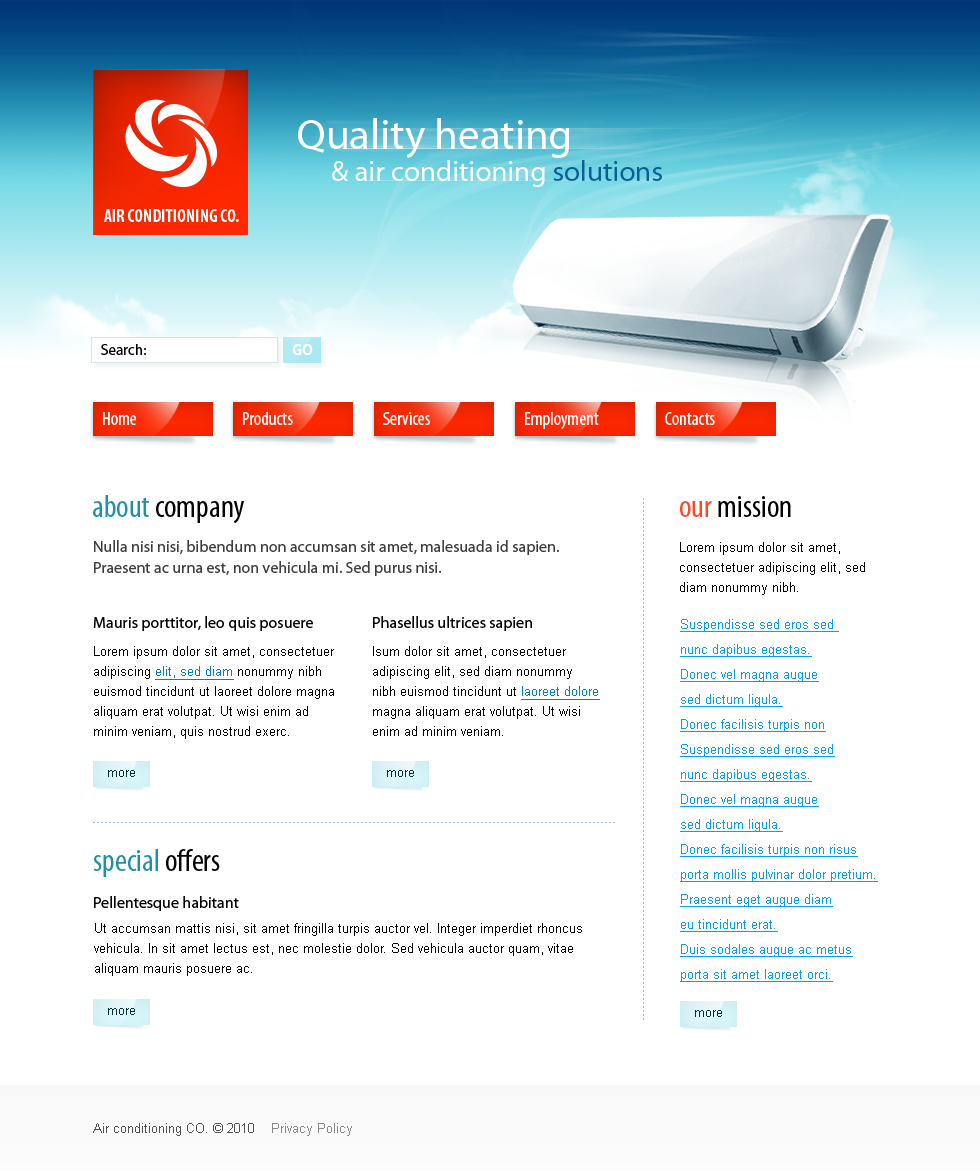
<style>
.page{position:relative;width:980px;height:1170px;background:#ffffff}
.page>*{position:absolute;margin:0}
.t1{font:43px "MyriadPro-Regular";color:#ffffff}
.t2{font:29px "MyriadPro-Regular";color:#ffffff}
.t3{font:29px "MyriadPro-Regular";color:#0a5f93}
.t4{font:18px "MyriadPro-BoldCond";color:#ffffff;text-transform:uppercase}
.t5{font:15px "MyriadPro-Regular";color:#000000}
.t6{font:15px "MyriadPro-Bold";color:#ffffff}
.t7{font:19px "MyriadPro-Cond";color:#ffffff}
.t8{font:32px "MyriadPro-Cond";color:#000000}
.t9{font:32px "MyriadPro-Cond";color:#1e90ac}
.t10{font:32px "MyriadPro-Cond";color:#fe4726}
.t11{font:16px/21px "MyriadPro-Regular";color:#3d3d3d}
.t12{font:13px/20px "ArialMT";color:#000000}
.t13{font:16px "MyriadPro-Regular";color:#000000}
.t14{font:13px/25px "ArialMT";color:#05a0ef;text-decoration:underline}
.t15{font:13px/20px "ArialMT";color:#0380c0;text-decoration:underline}
.t16{font:13px "ArialMT";color:#03303a}
.t17{font:13px "ArialMT";color:#515151}
.t18{font:13px "ArialMT";color:#888888}
</style>
<div class="page">
<p class="t1" style="left:298px;top:118px;width:272px;height:41px">Quality heating</p>
<p class="t2" style="left:332px;top:160px;width:330px;height:27px">&amp; air conditioning <span class="t3">solutions</span></p>
<p class="t4" style="left:104px;top:209px;width:135px;height:13px">Air conditioning CO.</p>
<p class="t5" style="left:101px;top:344px;width:45px;height:11px">Search:</p>
<p class="t6" style="left:292px;top:344px;width:21px;height:11px">GO</p>
<p class="t7" style="left:103px;top:412px;width:33px;height:13px">Home</p>
<p class="t7" style="left:243px;top:412px;width:50px;height:13px">Products</p>
<p class="t7" style="left:383px;top:412px;width:47px;height:13px">Services</p>
<p class="t7" style="left:525px;top:412px;width:74px;height:18px">Employment</p>
<p class="t7" style="left:665px;top:412px;width:50px;height:13px">Contacts</p>
<p class="t8" style="left:93px;top:495px;width:151px;height:29px"><span class="t9">about</span> company</p>
<p class="t8" style="left:680px;top:496px;width:111px;height:21px"><span class="t10">our</span> mission</p>
<p class="t11" style="left:94px;top:540px;width:465px;height:36px">Nulla nisi nisi, bibendum non accumsan sit amet, malesuada id sapien. Praesent ac urna est, non vehicula mi. Sed purus nisi.</p>
<p class="t12" style="left:680px;top:542px;width:185px;height:53px">Lorem ipsum dolor sit amet, consectetuer adipiscing elit, sed diam nonummy nibh.</p>
<p class="t13" style="left:93px;top:616px;width:220px;height:15px">Mauris porttitor, leo quis posuere</p>
<p class="t13" style="left:373px;top:616px;width:159px;height:15px">Phasellus ultrices sapien</p>
<p class="t14" style="left:680px;top:619px;width:198px;height:363px">Suspendisse sed eros sed <br>nunc dapibus egestas.<br>Donec vel magna augue<br>sed dictum ligula.<br>Donec facilisis turpis non<br>Suspendisse sed eros sed<br>nunc dapibus egestas.<br>Donec vel magna augue<br>sed dictum ligula.<br>Donec facilisis turpis non risus<br>porta mollis pulvinar dolor pretium.<br>Praesent eget augue diam<br>eu tincidunt erat.<br>Duis sodales augue ac metus<br>porta sit amet laoreet orci.</p>
<p class="t12" style="left:94px;top:646px;width:240px;height:93px">Lorem ipsum dolor sit amet, consectetuer adipiscing <span class="t15">elit, sed diam</span> nonummy nibh euismod tincidunt ut laoreet dolore magna aliquam erat volutpat. Ut wisi enim ad minim veniam, quis nostrud exerc.</p>
<p class="t12" style="left:373px;top:646px;width:227px;height:90px">Isum dolor sit amet, consectetuer adipiscing elit, sed diam nonummy nibh euismod tincidunt ut <span class="t15">laoreet dolore</span> magna aliquam erat volutpat. Ut wisi enim ad minim veniam.</p>
<p class="t16" style="left:108px;top:770px;width:27px;height:7px">more</p>
<p class="t16" style="left:387px;top:770px;width:27px;height:7px">more</p>
<p class="t9" style="left:93px;top:849px;width:127px;height:28px">special <span class="t8">offers</span></p>
<p class="t13" style="left:94px;top:896px;width:145px;height:15px">Pellentesque habitant</p>
<p class="t12" style="left:94px;top:923px;width:488px;height:53px">Ut accumsan mattis nisi, sit amet fringilla turpis auctor vel. Integer imperdiet rhoncus vehicula. In sit amet lectus est, nec molestie dolor. Sed vehicula auctor quam, vitae aliquam mauris posuere ac.</p>
<p class="t16" style="left:108px;top:1008px;width:27px;height:7px">more</p>
<p class="t16" style="left:695px;top:1010px;width:27px;height:7px">more</p>
<p class="t17" style="left:93px;top:1123px;width:259px;height:13px">Air conditioning CO. © 2010<span class="t18">    Privacy Policy</span></p>
</div>
